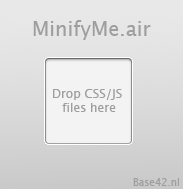
<style>
.page{position:relative;width:183px;height:189px}
.page>*{position:absolute;margin:0}
.t1{font:20px "LucidaGrande";color:#9e9e9e}
.t2{font:12px "LucidaGrande";color:#9e9e9e}
.t3{font:10px "LucidaGrande";color:#9e9e9e}
</style>
<div class="page">
<p class="t1" style="left:33px;top:20px;width:118px;height:20px">MinifyMe.air</p>
<p class="t2" style="left:53px;top:89px;width:69px;height:23px;text-align:center">Drop CSS/JS <br>files here</p>
<p class="t3" style="left:133px;top:178px;width:46px;height:8px">Base42.nl</p>
</div>
